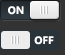
<style>
.page{position:relative;width:65px;height:55px;background:#333333}
.page>*{position:absolute;margin:0}
.t1{font:10px "MicrosoftYaHei-Bold";color:#ffffff}
</style>
<div class="page">
<p class="t1" style="left:8px;top:6px;width:16px;height:9px">ON</p>
<p class="t1" style="left:34px;top:36px;width:20px;height:9px">OFF</p>
</div>
